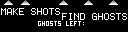
<style>
.page{position:relative;width:128px;height:32px;background:#000000}
.page>*{position:absolute;margin:0}
.t1{font:8px "Terminal";color:#ffffff}
</style>
<div class="page">
<p class="t1" style="left:1px;top:8px;width:59px;height:7px">MAKE SHOTS</p>
<p class="t1" style="left:62px;top:13px;width:65px;height:7px">FIND GHOSTS</p>
</div>
